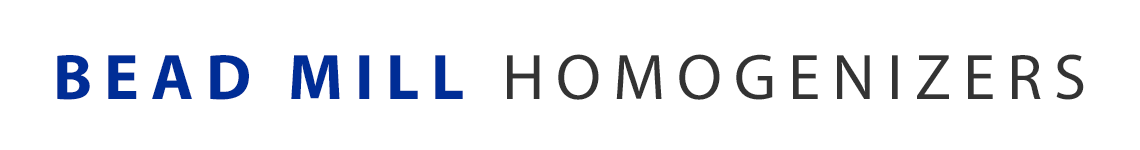
<style>
.page{position:relative;width:1140px;height:150px;background:#ffffff}
.page>*{position:absolute;margin:0}
.t1{font:65px "MyriadPro-Regular";letter-spacing:0.185em;color:#333333}
.t2{font:65px "MyriadPro-Bold";letter-spacing:0.185em;color:#002d96}
</style>
<div class="page">
<p class="t1" style="left:57px;top:54px;width:1027px;height:46px"><span class="t2">BEAD MILL </span>HOMOGENIZERS</p>
</div>
